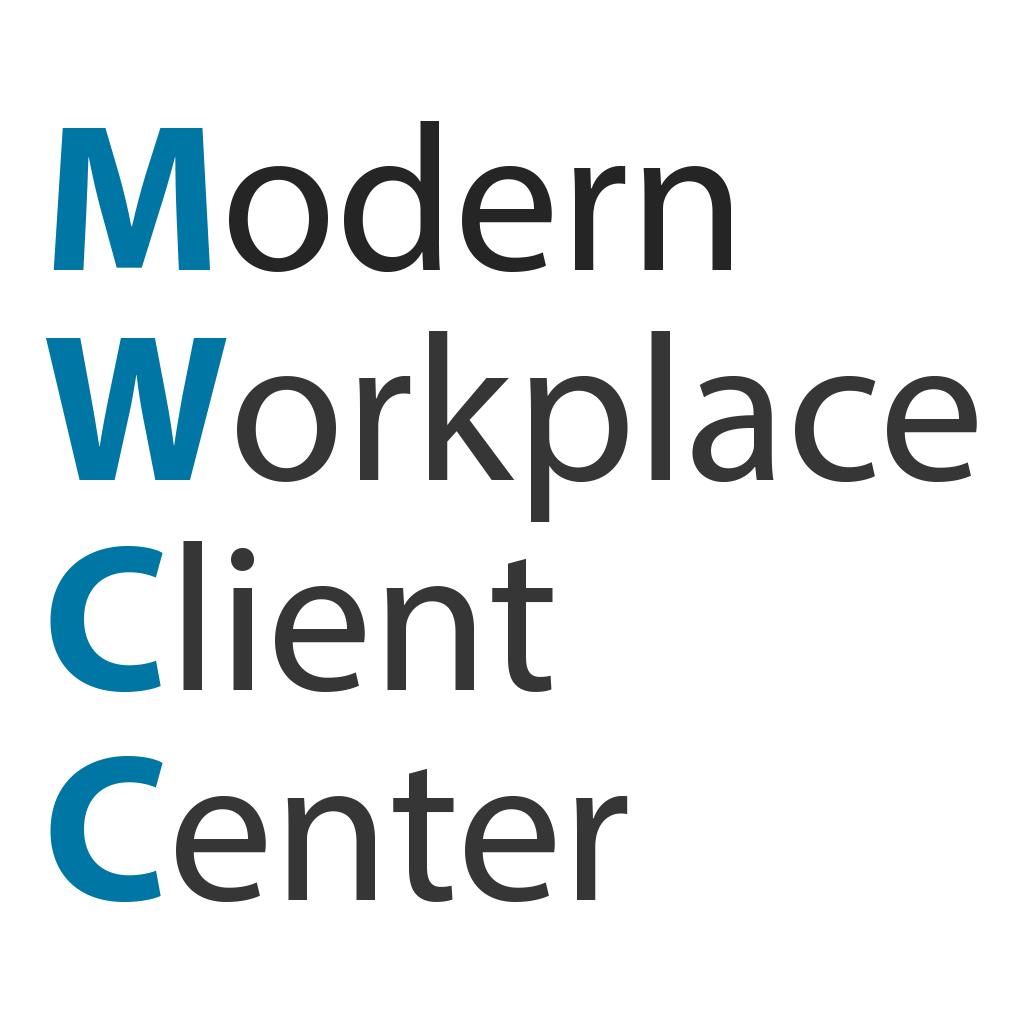
<style>
.page{position:relative;width:1024px;height:1024px;background:#ffffff}
.page>*{position:absolute;margin:0}
.t1{font:210px/210px "MyriadPro-Regular";color:#363636}
.t2{font:210px/210px "MyriadPro-Bold";color:#0076a4}
.t3{font:210px/210px "MyriadPro-Regular";color:#252525}
</style>
<div class="page">
<p class="t1" style="left:46px;top:121px;width:931px;height:782px"><span class="t2">M</span><span class="t3">odern<br></span><span class="t2">W</span>orkplace<br><span class="t2">C</span>lient<br><span class="t2">C</span>enter</p>
</div>
